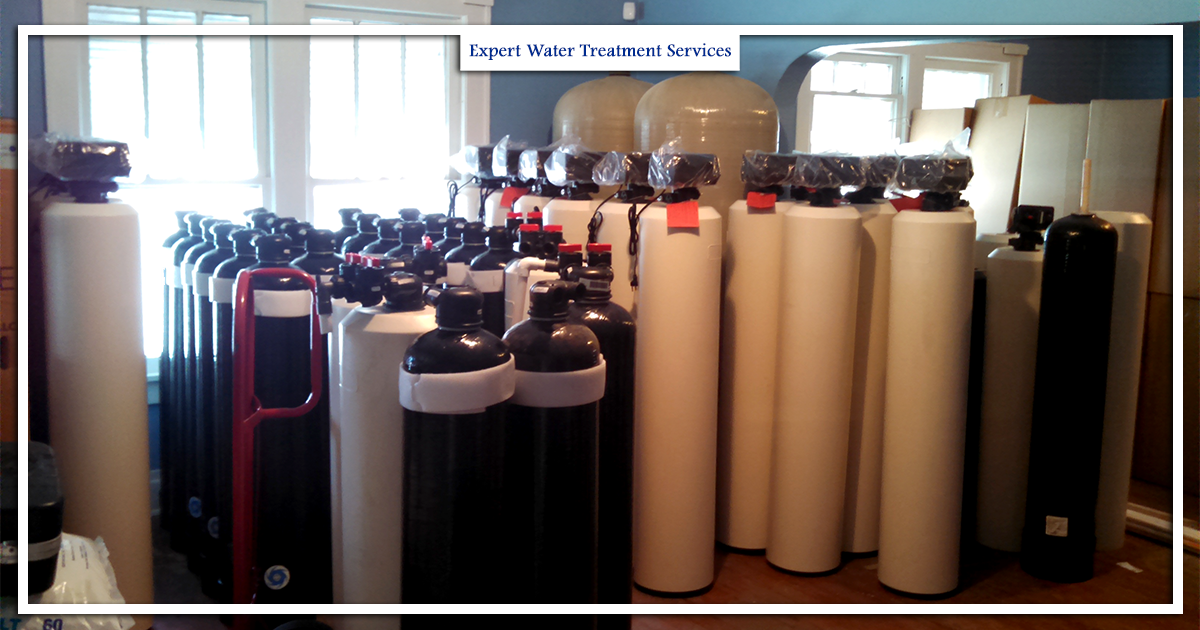
<style>
.page{position:relative;width:1200px;height:630px}
.page>*{position:absolute;margin:0}
.t1{font:18.4px "FootlightMTLight";color:#002c8f;font-weight:bold}
</style>
<div class="page">
<p class="t1" style="left:469px;top:43px;width:262px;height:17px">Expert Water Treatment Services</p>
</div>
